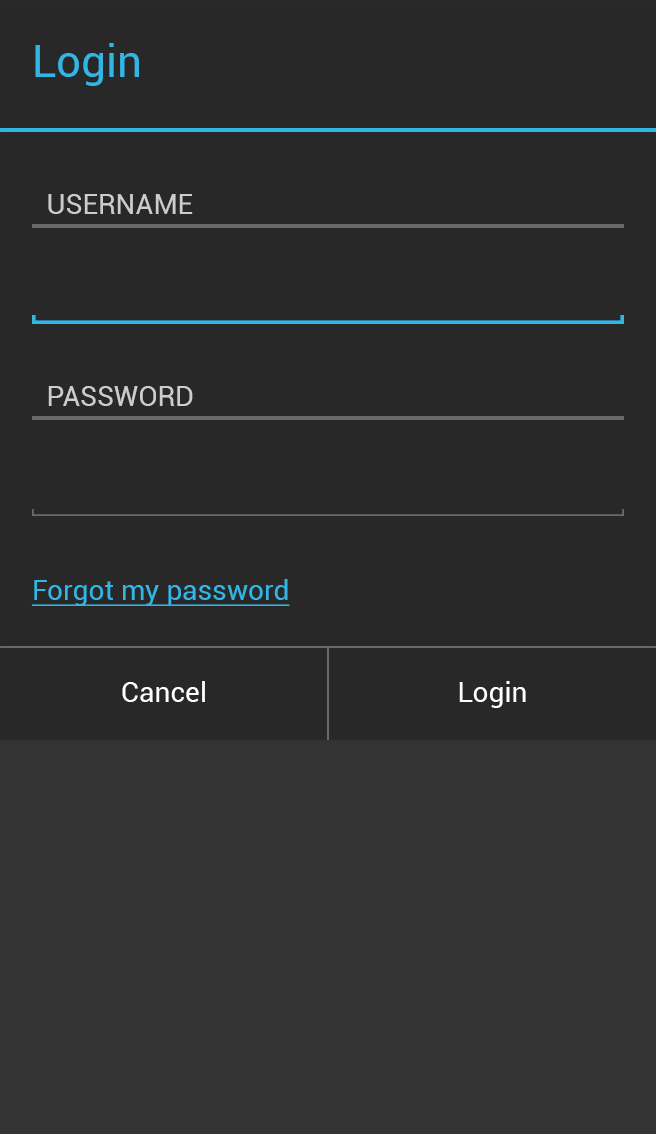
<style>
.page{position:relative;width:656px;height:1134px;background:#282828}
.page>*{position:absolute;margin:0}
.t1{font:44.4px "Roboto-Regular";color:#33b5e5}
.t2{font:28.4px "Roboto-Regular";color:#cccccc}
.t3{font:28.4px "Roboto-Regular";color:#33b5e5;text-decoration:underline}
.t4{font:28.4px "Roboto-Regular";color:#ffffff}
</style>
<div class="page">
<p class="t1" style="left:35px;top:43px;width:104px;height:43px">Login</p>
<p class="t2" style="left:48px;top:194px;width:145px;height:20px">USERNAME</p>
<p class="t2" style="left:48px;top:386px;width:145px;height:20px">PASSWORD</p>
<p class="t3" style="left:31px;top:579px;width:259px;height:27px">Forgot my password</p>
<p class="t4" style="left:122px;top:681px;width:83px;height:21px">Cancel</p>
<p class="t4" style="left:459px;top:681px;width:67px;height:27px">Login</p>
</div>
